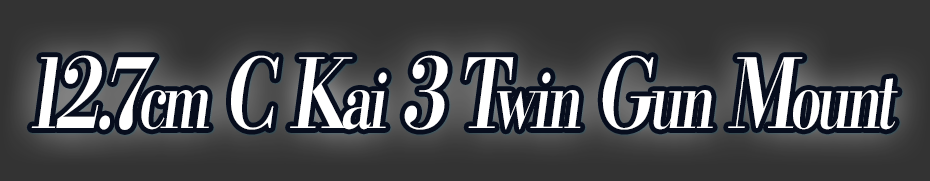
<style>
.page{position:relative;width:930px;height:181px;background:#333333}
.page>*{position:absolute;margin:0}
.t1{font:96px "KochoStd-Heavy";letter-spacing:-0.08em;color:#ffffff;font-style:italic;scale:0.74 1}
.t2{font:76.8px "KochoStd-Heavy";letter-spacing:-0.08em;color:#ffffff;font-style:italic;scale:0.74 1}
</style>
<div class="page">
<p class="t1" style="left:31px;top:55px;width:867px;height:75px">12.7<span class="t2">cm</span> C K<span class="t2">ai</span> 3 T<span class="t2">win</span> G<span class="t2">un</span> M<span class="t2">ount</span></p>
</div>
